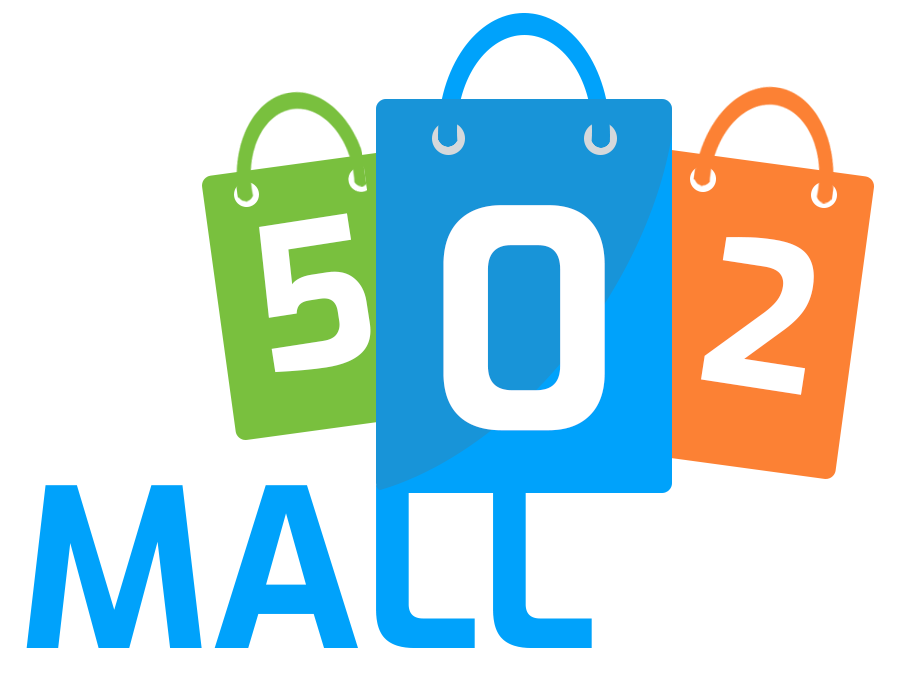
<style>
.page{position:relative;width:903px;height:682px;background:#ffffff}
.page>*{position:absolute;margin:0}
.t1{font:300px "Exo-Bold";color:#ffffff}
.t2{font:200px "Exo-Bold";color:#ffffff}
.t3{font:220px "Exo-Bold";color:#00a2fb}
</style>
<div class="page">
<p class="t1" style="left:443px;top:205px;width:162px;height:226px">0</p>
<p class="t2" style="left:259px;top:213px;width:112px;height:160px;rotate:-9deg">5</p>
<p class="t2" style="left:701px;top:237px;width:113px;height:158px;rotate:9deg">2</p>
<p class="t3" style="left:26px;top:485px;width:566px;height:163px">MALL</p>
</div>
